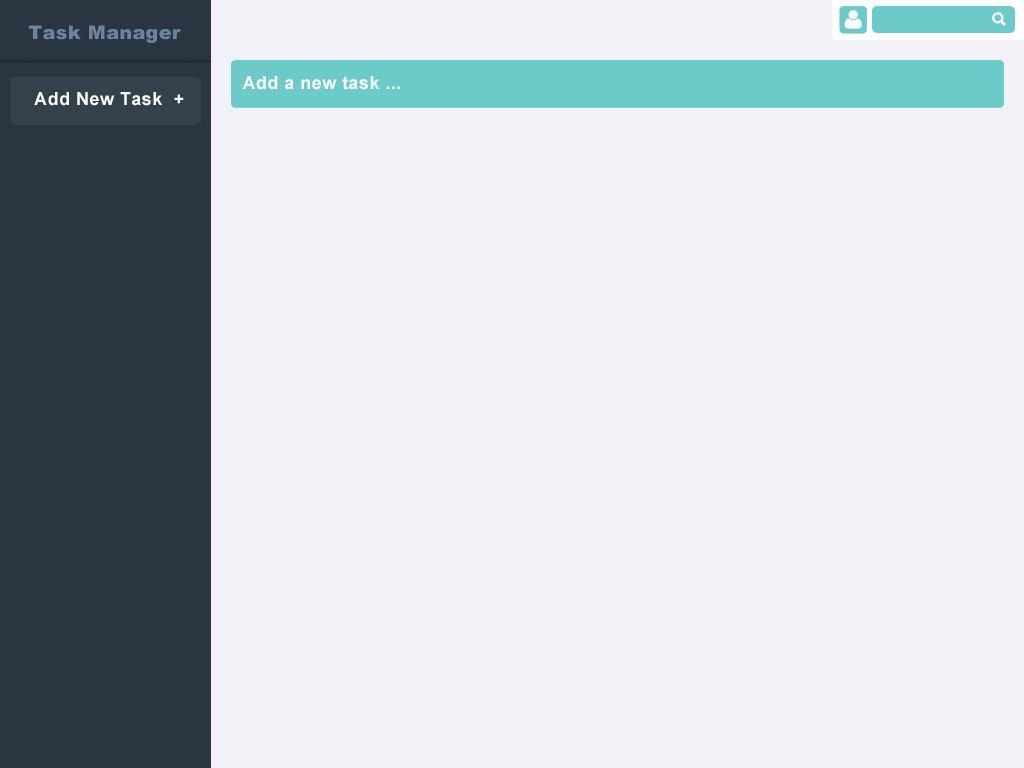
<style>
.page{position:relative;width:1024px;height:768px;background:#f1f2f7}
.page>*{position:absolute;margin:0}
.t1{font:19px "Arial-Black";letter-spacing:0.025em;color:#6f839c}
.t2{font:18px "Arial-BoldMT";letter-spacing:0.025em;color:#ffffff}
</style>
<div class="page">
<p class="t1" style="left:28px;top:25px;width:153px;height:18px">Task Manager</p>
<p class="t2" style="left:242px;top:76px;width:158px;height:14px">Add a new task ...</p>
<p class="t2" style="left:34px;top:92px;width:150px;height:14px">Add New Task  +</p>
</div>
